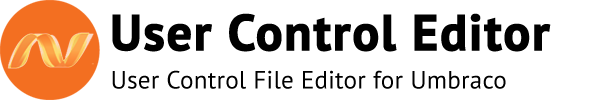
<style>
.page{position:relative;width:590px;height:100px;background:#ffffff}
.page>*{position:absolute;margin:0}
.t1{font:50px "PTSans-Bold";letter-spacing:0.01em;color:#000000;font-weight:bold}
.t2{font:25px "PTSans-Regular";letter-spacing:0.01em;color:#000000}
</style>
<div class="page">
<p class="t1" style="left:112px;top:13px;width:439px;height:39px">User Control Editor</p>
<p class="t2" style="left:112px;top:70px;width:394px;height:19px">User Control File Editor for Umbraco</p>
</div>
